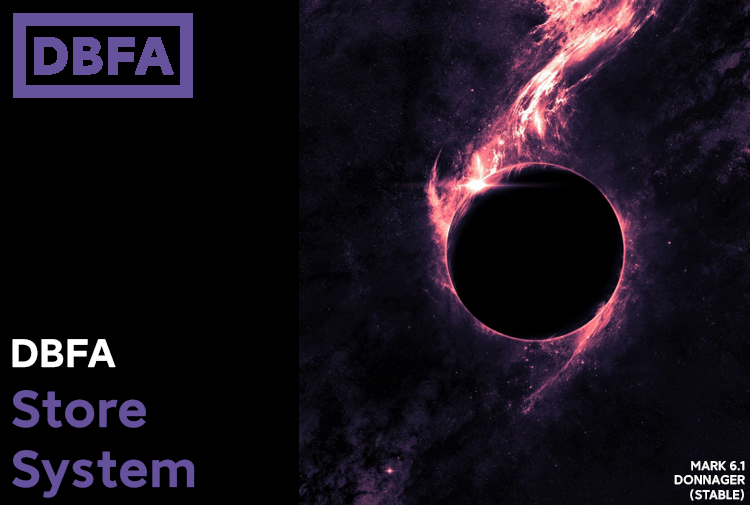
<style>
.page{position:relative;width:750px;height:505px;background:#000000}
.page>*{position:absolute;margin:0}
.t1{font:50px "MILanProVF-SemiBold";color:#66529c}
.t2{font:38.3px "MILanProVF-SemiBold";color:#ffffff}
.t3{font:12px "MILanProVF-Medium";color:#f9f6f6}
</style>
<div class="page">
<p class="t1" style="left:12px;top:339px;width:183px;height:159px"><span class="t2">DBFA<br></span>Store<br>System</p>
<p class="t3" style="left:674px;top:461px;width:71px;height:40px;text-align:right">MARK 6.1<br>DONNAGER<br>(STABLE)</p>
</div>
